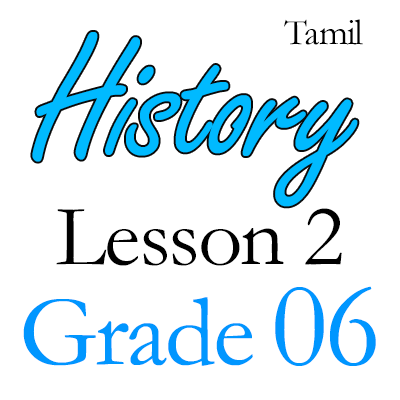
<style>
.page{position:relative;width:400px;height:400px;background:#ffffff}
.page>*{position:absolute;margin:0}
.t1{font:37.5px "Garamond";letter-spacing:-0.025em;color:#000000}
.t2{font:180.6px "FreestyleScript-Regular";letter-spacing:-0.025em;color:#00baff}
.t3{font:87.5px/100px "Garamond";letter-spacing:-0.025em;color:#000000}
.t4{font:101.4px/100px "Garamond";letter-spacing:-0.025em;color:#0096ff}
.t5{font:120.8px/100px "Garamond";letter-spacing:-0.025em;color:#0096ff}
</style>
<div class="page">
<p class="t1" style="left:284px;top:19px;width:79px;height:26px">Tamil</p>
<p class="t2" style="left:32px;top:32px;width:326px;height:175px">History</p>
<p class="t3" style="left:23px;top:208px;width:353px;height:158px;text-align:center">Lesson 2<br><span class="t4">Grade </span><span class="t5">06</span></p>
</div>
